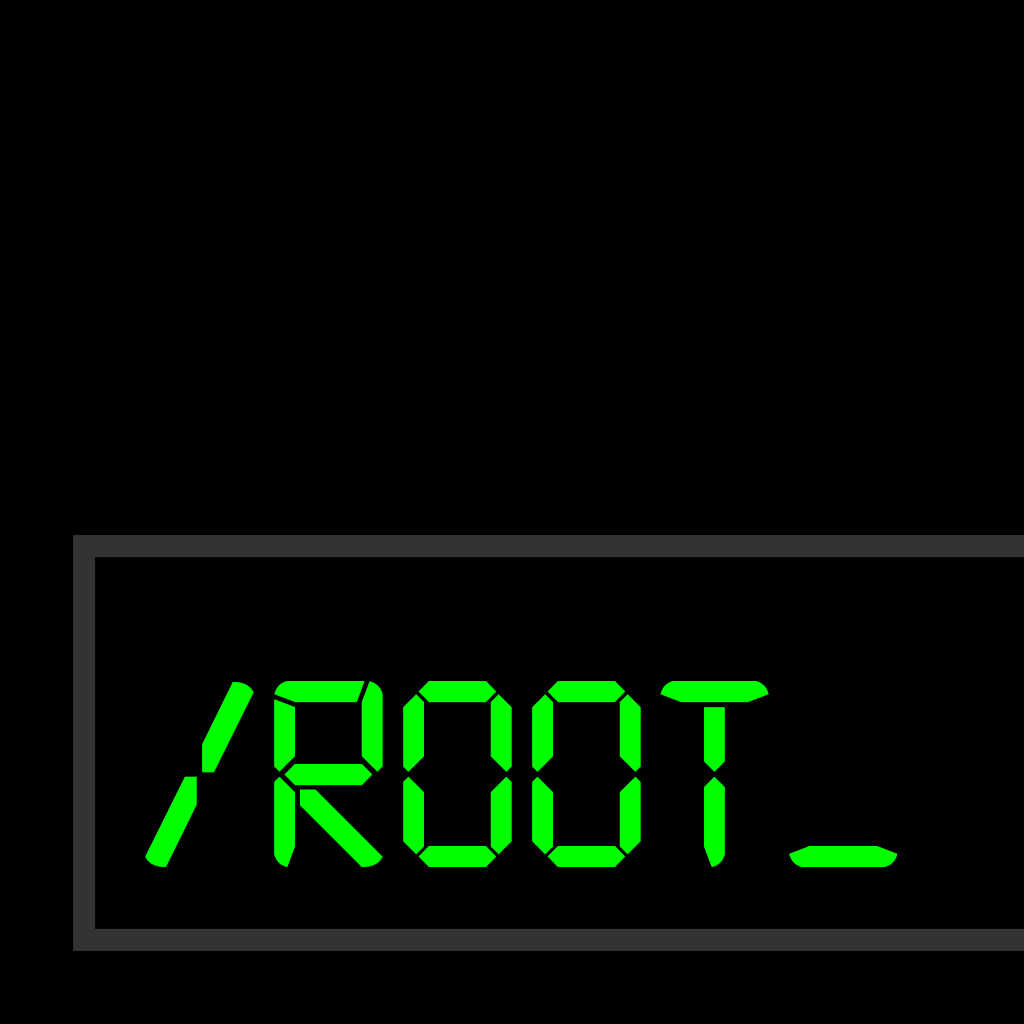
<style>
.page{position:relative;width:1024px;height:1024px;background:#000000}
.page>*{position:absolute;margin:0}
.t1{font:283.4px "Digital-7Mono";color:#00ff00}
</style>
<div class="page">
<p class="t1" style="left:145px;top:681px;width:753px;height:186px">/Root_</p>
</div>
